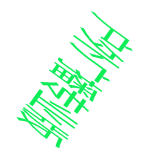
<style>
.page{position:relative;width:154px;height:154px;background:#ffffff}
.page>*{position:absolute;margin:0}
.t1{font:58.3px "MicrosoftYaHei";color:#0eec57;scale:0.32 1}
</style>
<div class="page">
<p class="t1" style="left:16px;top:11px;width:117px;height:138px;rotate:126deg">户外广播专业版</p>
</div>
